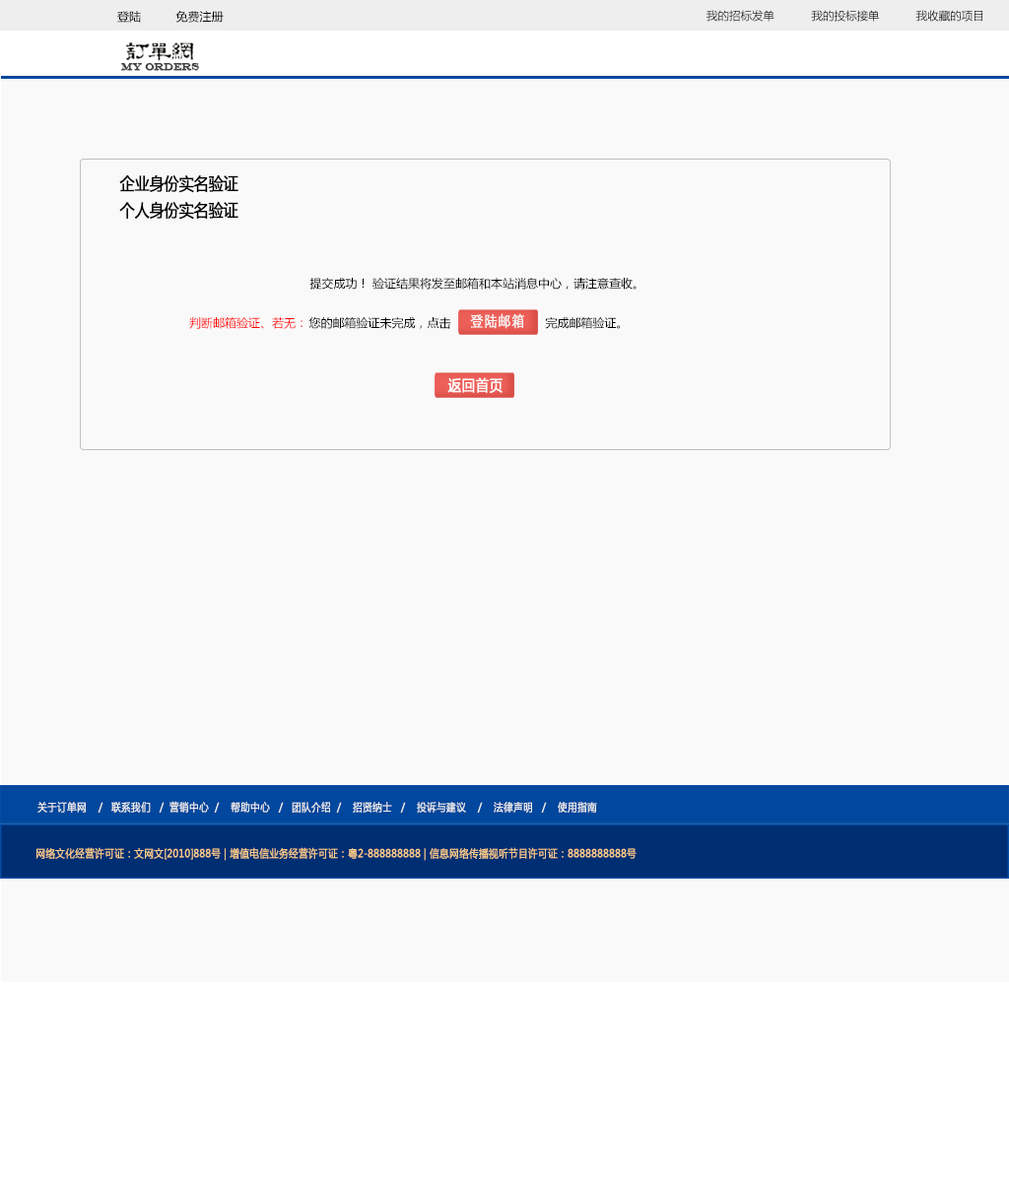
<style>
.page{position:relative;width:1009px;height:1182px;background:#f9f9f9}
.page>*{position:absolute;margin:0}
.t1{font:11.8px "MicrosoftYaHei";color:#000000}
.t2{font:11.3px "MicrosoftYaHei";color:#000000}
.t3{font:10.8px "EngraversMT";color:#434343;font-variant:small-caps;font-weight:bold;scale:0.86 1}
.t4{font:17.2px "MicrosoftYaHei";color:#000000;font-variant:small-caps;font-weight:bold;scale:0.86 1}
.t5{font:11.8px "MicrosoftYaHei";color:#ff0000}
.t6{font:15.2px "STXihei";color:#f9f9f9;font-variant:small-caps;font-weight:bold;scale:0.86 1}
.t7{font:15.2px "STXihei";color:#000000;font-variant:small-caps;font-weight:bold;scale:0.86 1}
.t8{font:15.2px "MicrosoftYaHei";color:#ffffff;font-variant:small-caps;font-weight:bold;scale:0.86 1}
.t9{font:10.8px "MicrosoftYaHei";color:#eeeeee;font-variant:small-caps;font-weight:bold;scale:0.86 1}
.t10{font:15.2px "STXihei";color:#eeeeee;font-variant:small-caps;font-weight:bold;scale:0.86 1}
.t11{font:10.8px "MicrosoftYaHei";color:#facd89;font-variant:small-caps;font-weight:bold;scale:0.87 1}
.t12{font:10.8px "MicrosoftYaHei";color:#eeeeee;font-variant:small-caps;font-weight:bold;scale:0.87 1}
</style>
<div class="page">
<p class="t1" style="left:117px;top:11px;width:107px;height:12px">登陆          免费注册</p>
<p class="t2" style="left:706px;top:10px;width:276px;height:12px">我的招标发单           我的投标接单           我收藏的项目</p>
<p class="t3" style="left:121px;top:63px;width:78px;height:8px">MY ORDERS</p>
<p class="t4" style="left:119px;top:174px;width:119px;height:19px">企业身份实名验证</p>
<p class="t4" style="left:119px;top:201px;width:119px;height:19px">个人身份实名验证</p>
<p class="t1" style="left:309px;top:278px;width:327px;height:12px">提交成功！ 验证结果将发至邮箱和本站消息中心，请注意查收。</p>
<p class="t5" style="left:189px;top:317px;width:113px;height:12px">判断邮箱验证、若无：</p>
<p class="t1" style="left:308px;top:317px;width:312px;height:12px">您的邮箱验证未完成，点击                           完成邮箱验证。</p>
<p class="t6" style="left:470px;top:313px;width:54px;height:16px"><span class="t7"> </span>登陆邮箱</p>
<p class="t8" style="left:447px;top:377px;width:55px;height:16px">返回首页</p>
<p class="t9" style="left:37px;top:801px;width:560px;height:12px"><span class="t10"><br><br></span>关于订单网    /   联系我们   /  营销中心  /    帮助中心   /   团队介绍  /    招贤纳士   /    投诉与建议    /    法律声明   /    使用指南</p>
<p class="t11" style="left:36px;top:847px;width:600px;height:14px"><span class="t12"> </span>网络文化经营许可证：文网文[2010]888号 | 增值电信业务经营许可证：粤2-888888888 | 信息网络传播视听节目许可证：8888888888号</p>
</div>
